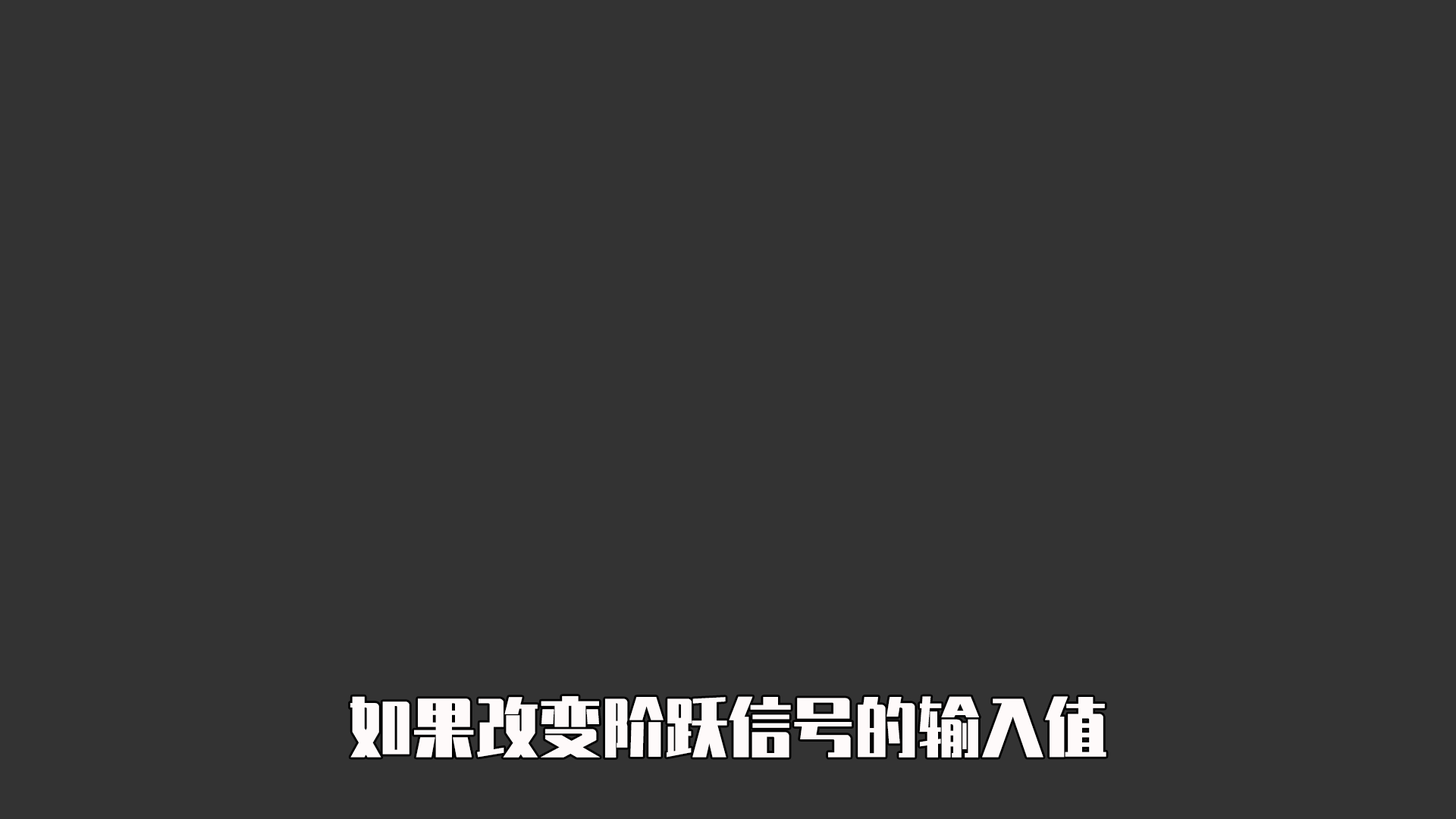
<style>
.page{position:relative;width:1456px;height:819px;background:#333333}
.page>*{position:absolute;margin:0}
.t1{font:63.2px "ZhenyanGB-Regular";color:#fefafa}
</style>
<div class="page">
<p class="t1" style="left:350px;top:696px;width:756px;height:62px">如果改变阶跃信号的输入值</p>
</div>
